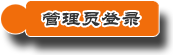
<style>
.page{position:relative;width:173px;height:55px;background:#f16d0b}
.page>*{position:absolute;margin:0}
.t1{font:20px "STLiti";color:#333333}
</style>
<div class="page">
<p class="t1" style="left:42px;top:12px;width:98px;height:14px">管理员登录</p>
</div>
